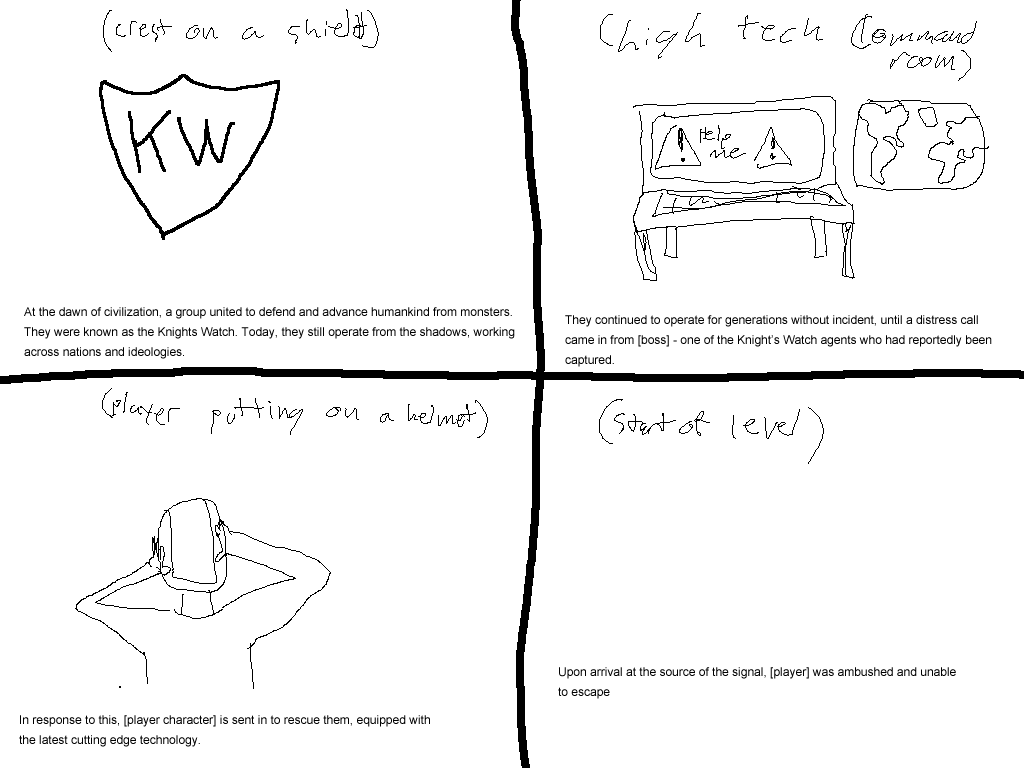
<style>
.page{position:relative;width:1024px;height:768px;background:#ffffff}
.page>*{position:absolute;margin:0}
.t1{font:12px/20px "ArialMT";color:#000000}
</style>
<div class="page">
<p class="t1" style="left:24px;top:307px;width:491px;height:52px">At the dawn of civilization, a group united to defend and advance humankind from monsters. <br>They were known as the Knights Watch. Today, they still operate from the shadows, working <br>across nations and ideologies.</p>
<p class="t1" style="left:565px;top:315px;width:427px;height:52px">They continued to operate for generations without incident, until a distress call<br>came in from [boss] - one of the Knight’s Watch agents who had reportedly been<br>captured.</p>
<p class="t1" style="left:558px;top:667px;width:398px;height:32px">Upon arrival at the source of the signal, [player] was ambushed and unable<br>to escape</p>
<p class="t1" style="left:19px;top:715px;width:411px;height:32px">In response to this, [player character] is sent in to rescue them, equipped with<br>the latest cutting edge technology.</p>
</div>
